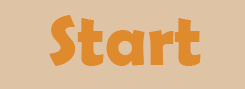
<style>
.page{position:relative;width:245px;height:89px;background:#dec3a5}
.page>*{position:absolute;margin:0}
.t1{font:72px "BerlinSansFBDemi-Bold";color:#df8a2d}
</style>
<div class="page">
<p class="t1" style="left:49px;top:15px;width:152px;height:51px">Start</p>
</div>
